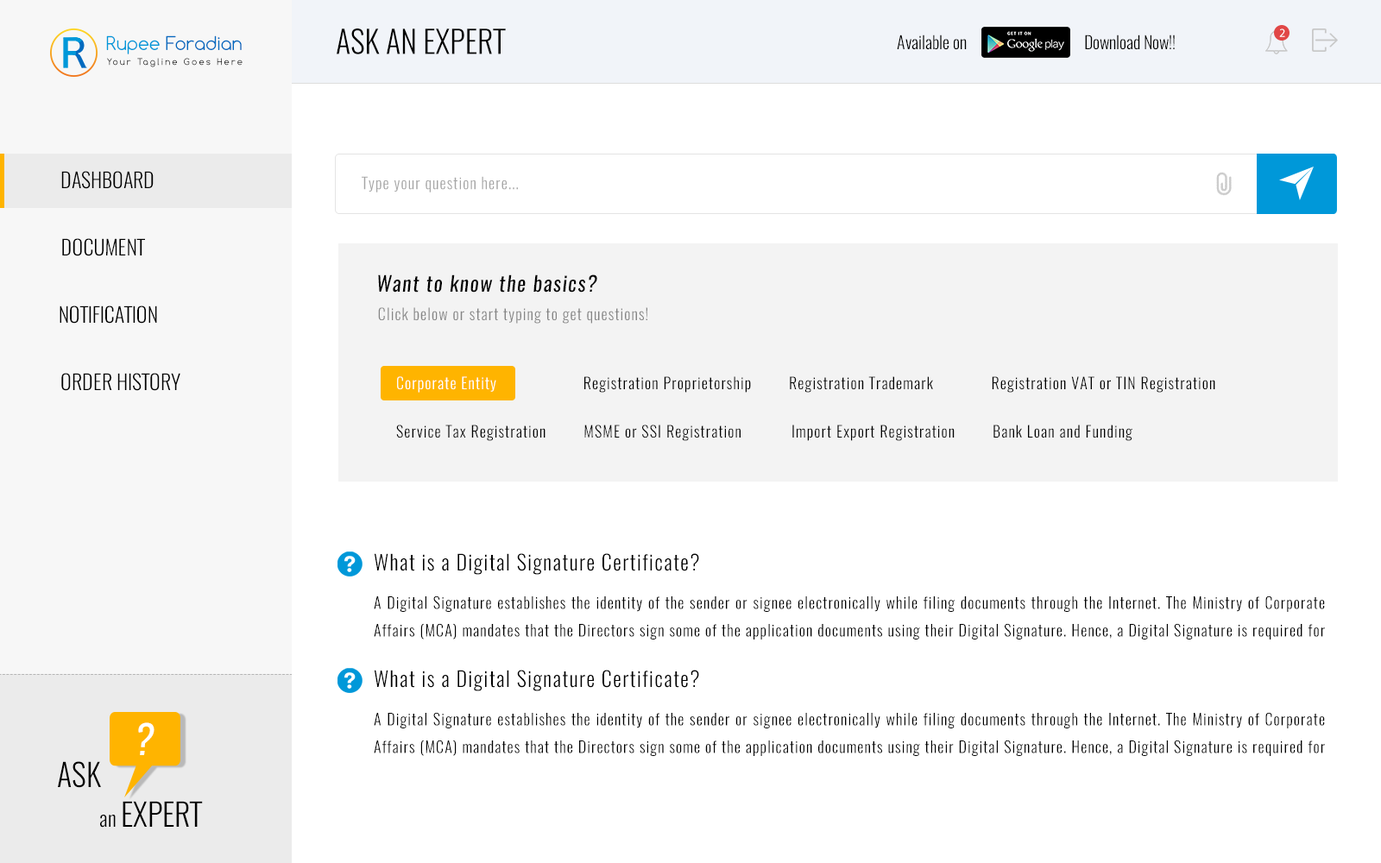
<style>
.page{position:relative;width:1381px;height:863px;background:#ffffff}
.page>*{position:absolute;margin:0}
.t1{font:31.1px "Oswald-Light";color:#000000;text-transform:uppercase}
.t2{font:12.1px "MyriadHebrew-Regular";color:#ffffff}
.t3{font:17.9px "Comfortaa";color:#026abf}
.t4{font:17.9px "Comfortaa";color:#0098d9}
.t5{font:8.6px "Comfortaa";letter-spacing:0.22em}
.t6{font:20.7px/67.3px "Oswald-Light";color:#000000;text-transform:uppercase}
.t7{font:15.5px "Oswald-Light";letter-spacing:0.06em;color:#a5a5a5}
.t8{font:20.7px "Oswald-RegularItalic";letter-spacing:0.06em;color:#000000}
.t9{font:15.5px "Oswald-Light";letter-spacing:0.06em;color:#848484}
.t10{font:15.5px/24.2px "Oswald-Light";letter-spacing:0.06em;color:#000000}
.t11{font:15.5px/24.2px "Oswald-Light";letter-spacing:0.06em;color:#ffffff}
.t12{font:20.7px "Oswald-Light";letter-spacing:0.06em;color:#000000}
.t13{font:15.5px/27.6px "Oswald-Light";letter-spacing:0.06em;color:#000000}
.t14{font:39.7px "Oswald-RegularItalic";color:#ffffff}
.t15{font:20.7px "Oswald-Light";color:#000000}
</style>
<div class="page">
<p class="t1" style="left:337px;top:28px;width:169px;height:26px">ask an expert</p>
<p class="t2" style="left:1279px;top:28px;width:6px;height:9px">2</p>
<p class="t3" style="left:106px;top:35px;width:136px;height:19px"><span class="t4">Rupee </span>Foradian</p>
<p class="t5" style="left:107px;top:58px;width:136px;height:9px">Your Tagline Goes Here</p>
<p class="t6" style="left:60px;top:171px;width:120px;height:220px;text-align:right">dashboard<br>Document<br>Notification<br>order History</p>
<p class="t7" style="left:362px;top:176px;width:156px;height:17px">Type your question here...</p>
<p class="t8" style="left:378px;top:275px;width:219px;height:18px">Want to know the basics?</p>
<p class="t9" style="left:378px;top:307px;width:269px;height:17px">Click below or start typing to get questions!</p>
<p class="t10" style="left:396px;top:376px;width:820px;height:65px;text-align:justify"><span class="t11">Corporate Entity</span>                     Registration Proprietorship         Registration Trademark              Registration VAT or TIN Registration   <br>      <br>Service Tax Registration         MSME or SSI Registration            Import Export Registration         Bank Loan and Funding</p>
<p class="t12" style="left:374px;top:553px;width:325px;height:22px">What is a Digital Signature Certificate?</p>
<p class="t13" style="left:374px;top:596px;width:951px;height:44px;text-align:justify">A Digital Signature establishes the identity of the sender or signee electronically while filing documents through the Internet. The Ministry of Corporate Affairs (MCA) mandates that the Directors sign some of the application documents using their Digital Signature. Hence, a Digital Signature is required for all Directors of a proposed Company.</p>
<p class="t12" style="left:374px;top:670px;width:325px;height:21px">What is a Digital Signature Certificate?</p>
<p class="t13" style="left:374px;top:712px;width:951px;height:44px;text-align:justify">A Digital Signature establishes the identity of the sender or signee electronically while filing documents through the Internet. The Ministry of Corporate Affairs (MCA) mandates that the Directors sign some of the application documents using their Digital Signature. Hence, a Digital Signature is required for all Directors of a proposed Company.</p>
<p class="t14" style="left:138px;top:723px;width:17px;height:32px">?</p>
<p class="t1" style="left:58px;top:761px;width:43px;height:27px">Ask</p>
<p class="t1" style="left:100px;top:801px;width:103px;height:27px"><span class="t15">an </span>expert</p>
</div>
